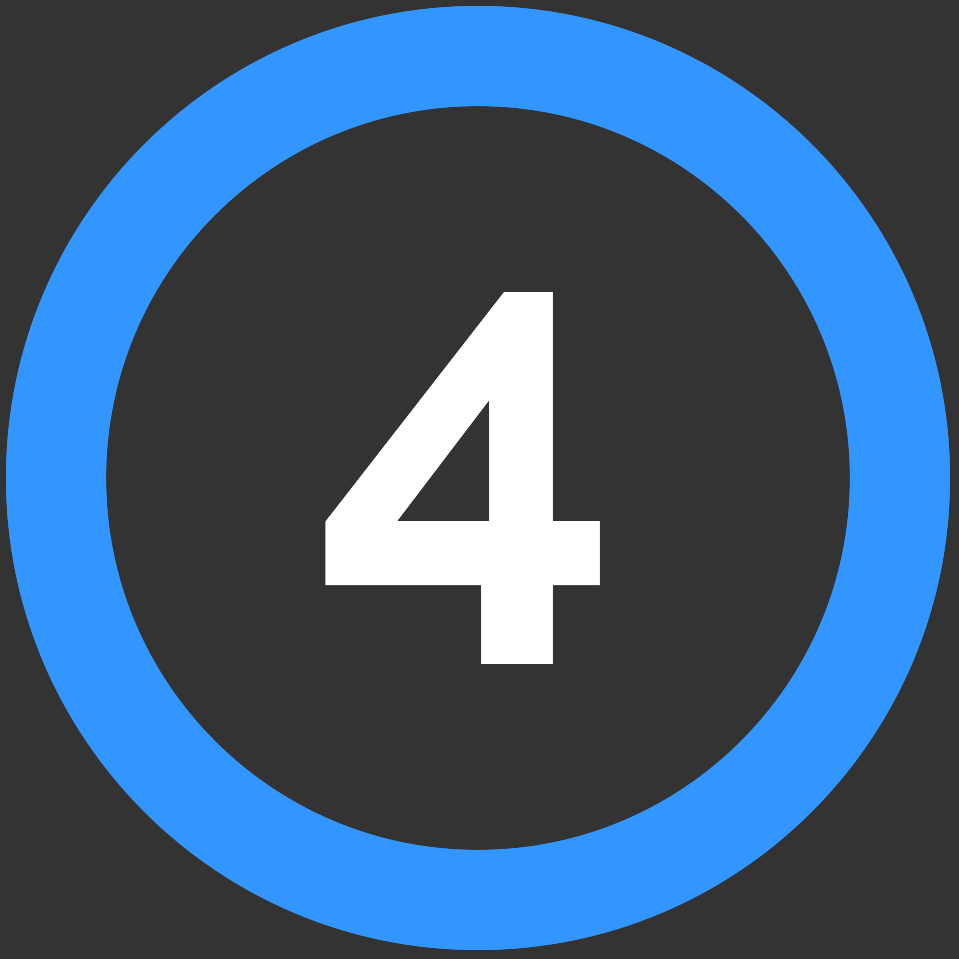
<style>
.page{position:relative;width:959px;height:959px;background:#333333}
.page>*{position:absolute;margin:0}
.t1{font:533.3px "RalewayRoman-Bold";color:#ffffff}
</style>
<div class="page">
<p class="t1" style="left:325px;top:292px;width:275px;height:372px">4</p>
</div>
